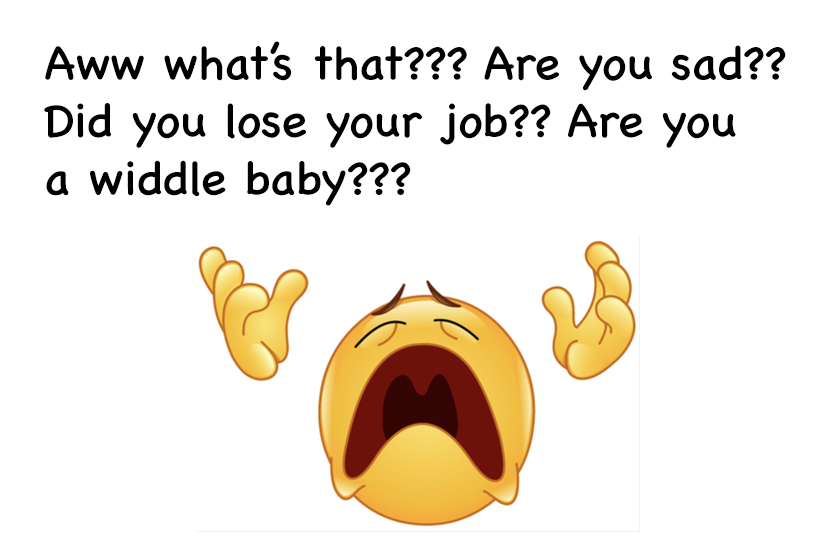
<style>
.page{position:relative;width:836px;height:558px;background:#ffffff}
.page>*{position:absolute;margin:0}
.t1{font:48px "ChalkboardSE-Regular";color:#000000}
</style>
<div class="page">
<p class="t1" style="left:44px;top:41px;width:742px;height:165px">Aww what’s that??? Are you sad??<br>Did you lose your job?? Are you <br>a widdle baby???</p>
</div>
